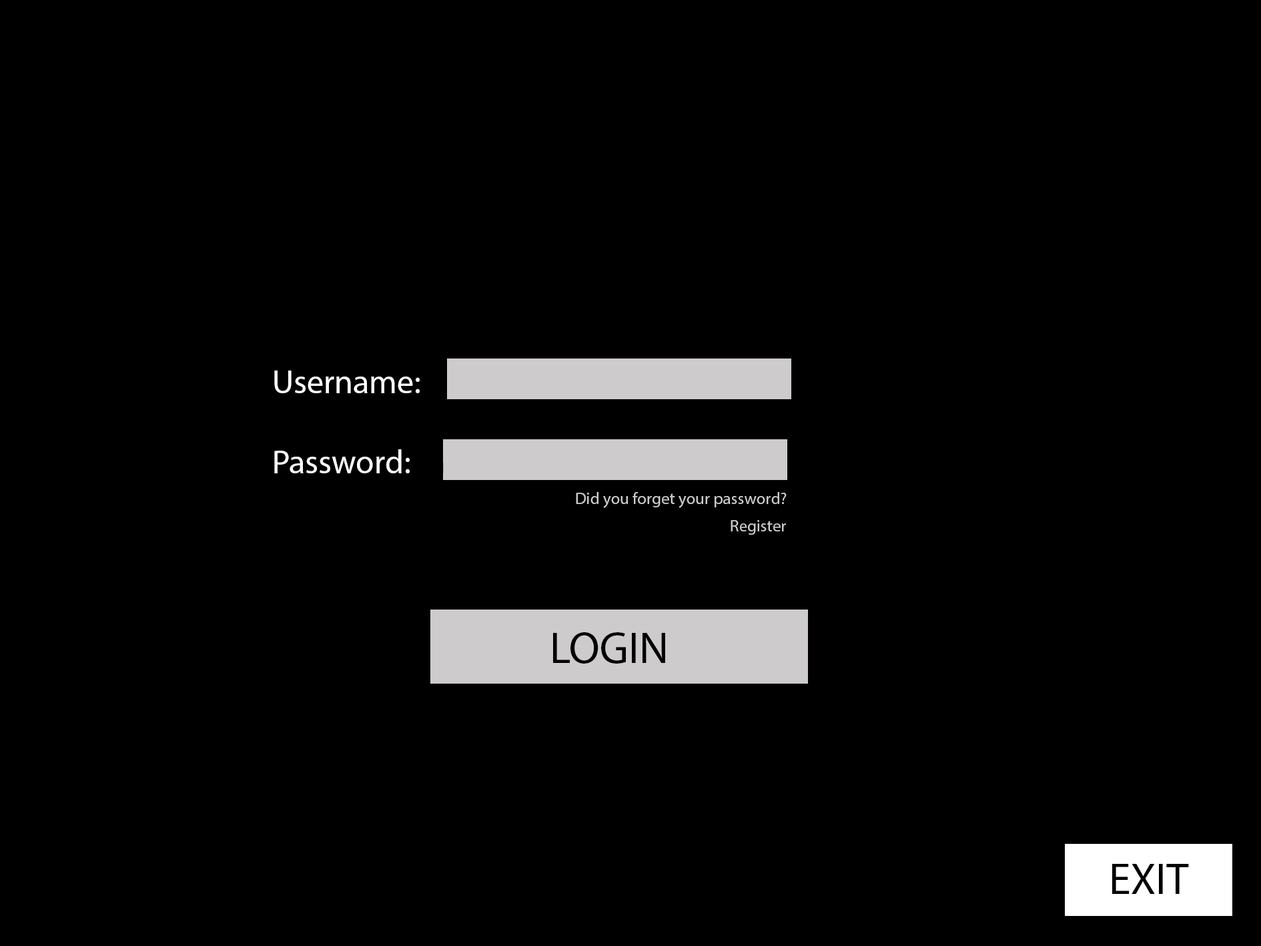
<style>
.page{position:relative;width:1261px;height:946px;background:#000000}
.page>*{position:absolute;margin:0}
.t1{font:33.4px "MyriadPro-Regular";color:#ffffff}
.t2{font:33.4px "MyriadPro-Regular";color:#000000}
.t3{font:16.7px "MyriadPro-Regular";color:#cecccc}
.t4{font:44.5px "MyriadPro-Regular";color:#000000}
</style>
<div class="page">
<p class="t1" style="left:274px;top:370px;width:170px;height:103px">Username: <br><br>Password: <span class="t2">m</span></p>
<p class="t3" style="left:576px;top:492px;width:211px;height:16px">Did you forget your password?</p>
<p class="t3" style="left:731px;top:520px;width:55px;height:14px">Register</p>
<p class="t4" style="left:553px;top:632px;width:112px;height:31px">LOGIN</p>
<p class="t4" style="left:1112px;top:863px;width:77px;height:30px">EXIT</p>
</div>
